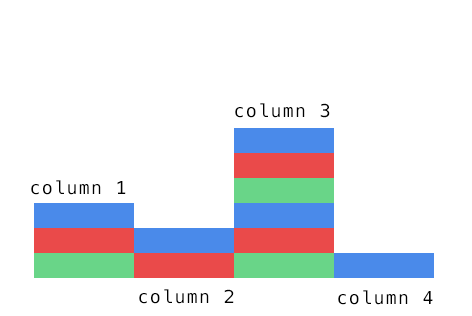
<style>
.page{position:relative;width:472px;height:316px;background:#ffffff}
.page>*{position:absolute;margin:0}
.t1{font:18px "Menlo-Regular";letter-spacing:0.08em;color:#000000}
</style>
<div class="page">
<p class="t1" style="left:235px;top:103px;width:95px;height:15px">column 3</p>
<p class="t1" style="left:31px;top:180px;width:95px;height:15px">column 1</p>
<p class="t1" style="left:139px;top:289px;width:95px;height:15px">column 2</p>
<p class="t1" style="left:338px;top:290px;width:95px;height:15px">column 4</p>
</div>
